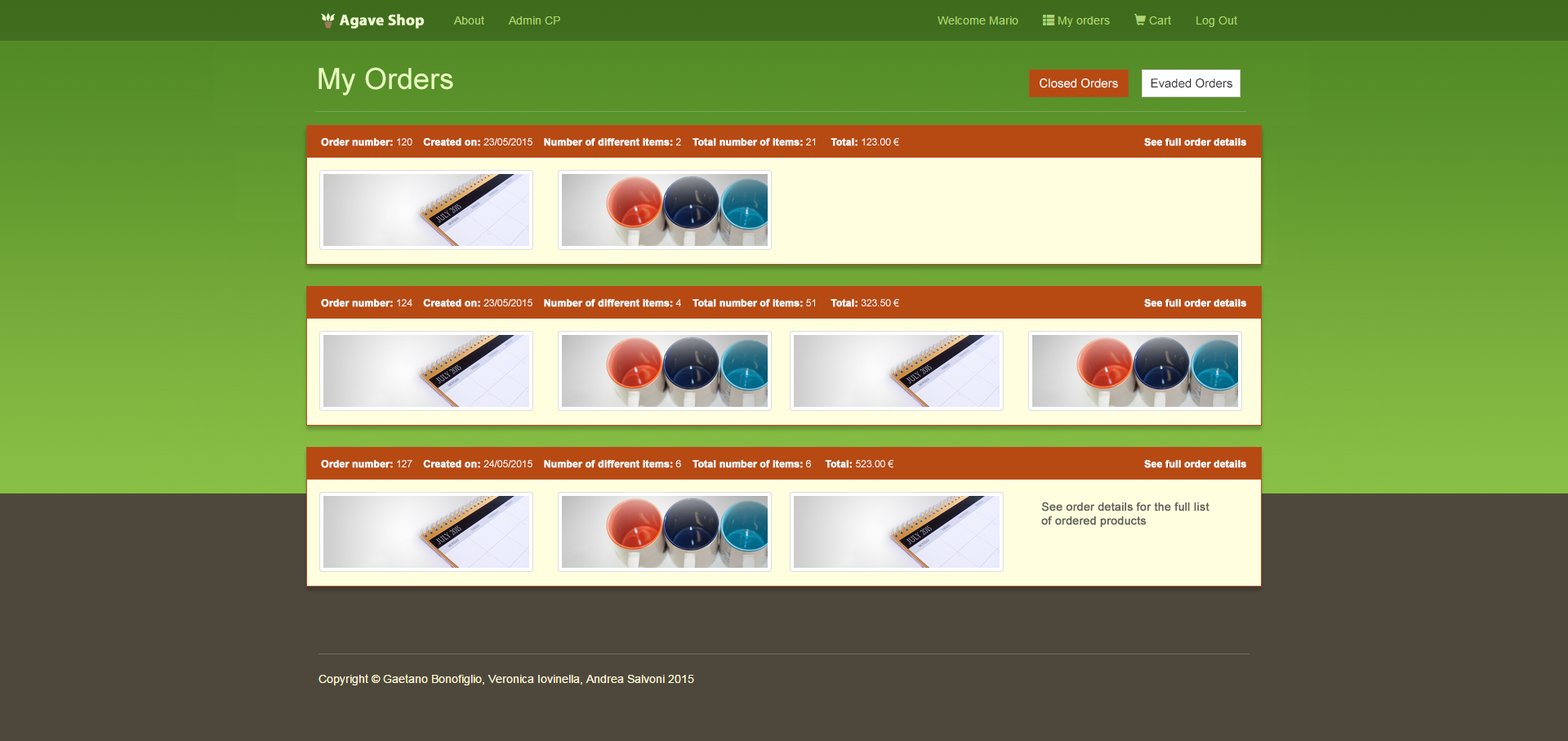
<style>
.page{position:relative;width:1568px;height:741px;background:#4e483c}
.page>*{position:absolute;margin:0}
.t1{font:29.4px "ArialMT";color:#e9ffbf}
.t2{font:12.2px "ArialMT";color:#ffffff}
.t3{font:12.2px "ArialMT";color:#333339}
.t4{font:9.8px "Arial-BoldMT";color:#ffffff;font-weight:bold}
.t5{font:9.8px "ArialMT";color:#ffffff}
.t6{font:11.4px "ArialMT";color:#616159;font-weight:bold}
</style>
<div class="page">
<p class="t1" style="left:318px;top:67px;width:135px;height:29px">My Orders</p>
<p class="t2" style="left:1040px;top:78px;width:78px;height:10px">Closed Orders</p>
<p class="t3" style="left:1151px;top:78px;width:81px;height:10px">Evaded Orders</p>
<p class="t4" style="left:321px;top:138px;width:925px;height:8px">Order number: <span class="t5">120    </span>Created on: <span class="t5">23/05/2015    </span>Number of different items: <span class="t5">2    </span>Total number of items: <span class="t5">21     </span>Total: <span class="t5">123.00 €                                                                                          </span>See full order details</p>
<p class="t4" style="left:321px;top:299px;width:925px;height:8px">Order number: <span class="t5">124    </span>Created on: <span class="t5">23/05/2015    </span>Number of different items: <span class="t5">4    </span>Total number of items: <span class="t5">51     </span>Total: <span class="t5">323.50 €                                                                                          </span>See full order details</p>
<p class="t4" style="left:321px;top:460px;width:925px;height:8px">Order number: <span class="t5">127    </span>Created on: <span class="t5">24/05/2015    </span>Number of different items: <span class="t5">6    </span>Total number of items: <span class="t5">6     </span>Total: <span class="t5">523.00 €                                                                                            </span>See full order details</p>
<p class="t6" style="left:1041px;top:501px;width:168px;height:26px">See order details for the full list of ordered products</p>
</div>
